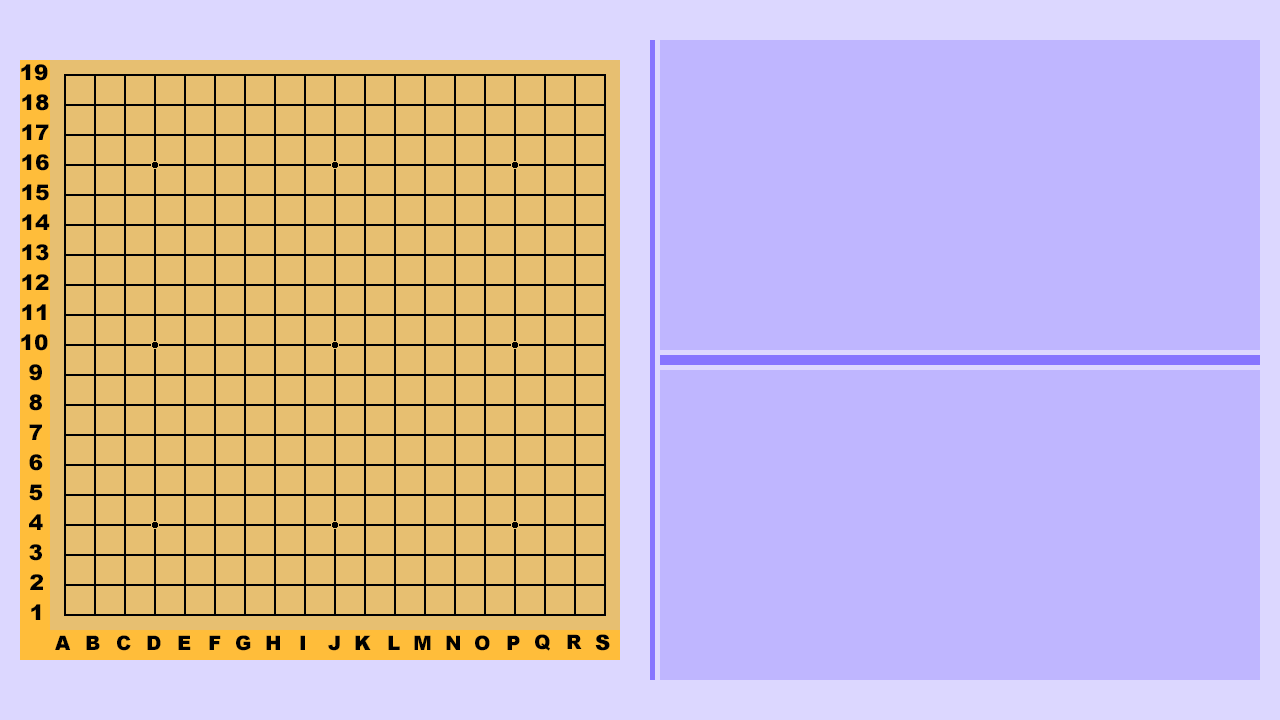
<style>
.page{position:relative;width:1280px;height:720px;background:#bfb6ff}
.page>*{position:absolute;margin:0}
.t1{font:21.7px "Arial-Black";color:#000000}
.t2{font:19.7px "Arial-Black";color:#000000}
.t3{font:21.2px "Arial-Black";color:#000000}
</style>
<div class="page">
<p class="t1" style="left:21px;top:64px;width:27px;height:17px">19</p>
<p class="t1" style="left:22px;top:94px;width:27px;height:17px">18</p>
<p class="t1" style="left:22px;top:124px;width:27px;height:16px">17</p>
<p class="t1" style="left:22px;top:154px;width:27px;height:17px">16</p>
<p class="t1" style="left:22px;top:184px;width:27px;height:17px">15</p>
<p class="t1" style="left:22px;top:214px;width:28px;height:16px">14</p>
<p class="t1" style="left:22px;top:244px;width:27px;height:17px">13</p>
<p class="t1" style="left:22px;top:274px;width:27px;height:16px">12</p>
<p class="t1" style="left:22px;top:304px;width:24px;height:16px">11</p>
<p class="t1" style="left:21px;top:334px;width:27px;height:17px">10</p>
<p class="t1" style="left:29px;top:364px;width:13px;height:17px">9</p>
<p class="t1" style="left:29px;top:394px;width:13px;height:17px">8</p>
<p class="t1" style="left:29px;top:424px;width:13px;height:16px">7</p>
<p class="t1" style="left:29px;top:454px;width:14px;height:17px">6</p>
<p class="t1" style="left:29px;top:484px;width:14px;height:17px">5</p>
<p class="t1" style="left:29px;top:514px;width:14px;height:16px">4</p>
<p class="t1" style="left:29px;top:544px;width:13px;height:17px">3</p>
<p class="t1" style="left:30px;top:574px;width:13px;height:16px">2</p>
<p class="t1" style="left:31px;top:604px;width:10px;height:16px">1</p>
<p class="t2" style="left:55px;top:635px;width:16px;height:15px">A</p>
<p class="t2" style="left:86px;top:635px;width:14px;height:15px">B</p>
<p class="t2" style="left:117px;top:635px;width:14px;height:16px">C</p>
<p class="t2" style="left:147px;top:635px;width:14px;height:15px">D</p>
<p class="t2" style="left:178px;top:635px;width:13px;height:15px">E</p>
<p class="t2" style="left:209px;top:635px;width:12px;height:15px">F</p>
<p class="t2" style="left:236px;top:635px;width:15px;height:16px">G</p>
<p class="t2" style="left:266px;top:635px;width:14px;height:15px">H</p>
<p class="t2" style="left:300px;top:635px;width:5px;height:15px">I</p>
<p class="t2" style="left:328px;top:635px;width:12px;height:16px">J</p>
<p class="t2" style="left:355px;top:635px;width:16px;height:15px">K</p>
<p class="t2" style="left:388px;top:635px;width:12px;height:15px">L</p>
<p class="t2" style="left:414px;top:635px;width:17px;height:15px">M</p>
<p class="t2" style="left:446px;top:635px;width:14px;height:15px">N</p>
<p class="t2" style="left:475px;top:635px;width:15px;height:16px">O</p>
<p class="t2" style="left:507px;top:635px;width:13px;height:15px">P</p>
<p class="t2" style="left:535px;top:634px;width:15px;height:17px">Q</p>
<p class="t2" style="left:567px;top:634px;width:15px;height:15px">R</p>
<p class="t3" style="left:595px;top:634px;width:15px;height:17px">S</p>
</div>
